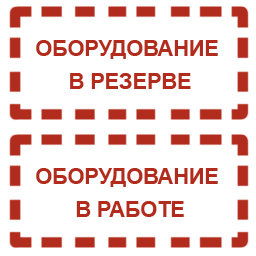
<style>
.page{position:relative;width:256px;height:256px;background:#ffffff}
.page>*{position:absolute;margin:0}
.t1{font:37px/32.5px "Arial-BoldMT";color:#b22c1d}
</style>
<div class="page">
<p class="t1" style="left:36px;top:40px;width:182px;height:49px;text-align:center">ОБОРУДОВАНИЕ <br>В РЕЗЕРВЕ</p>
<p class="t1" style="left:36px;top:168px;width:182px;height:49px;text-align:center">ОБОРУДОВАНИЕ <br>В РАБОТЕ</p>
</div>
